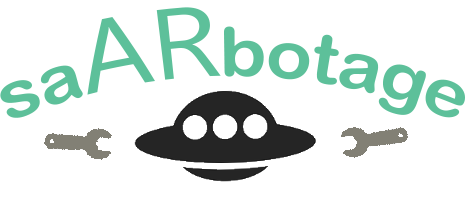
<style>
.page{position:relative;width:465px;height:200px;background:#ffffff}
.page>*{position:absolute;margin:0}
.t1{font:66.7px "ArialRoundedMTBold";color:#5dc09a}
.t2{font:100px "MicrosoftTaiLe";color:#5dc09a}
</style>
<div class="page">
<p class="t1" style="left:0px;top:7px;width:465px;height:111px">sa<span class="t2">AR</span>botage</p>
</div>
